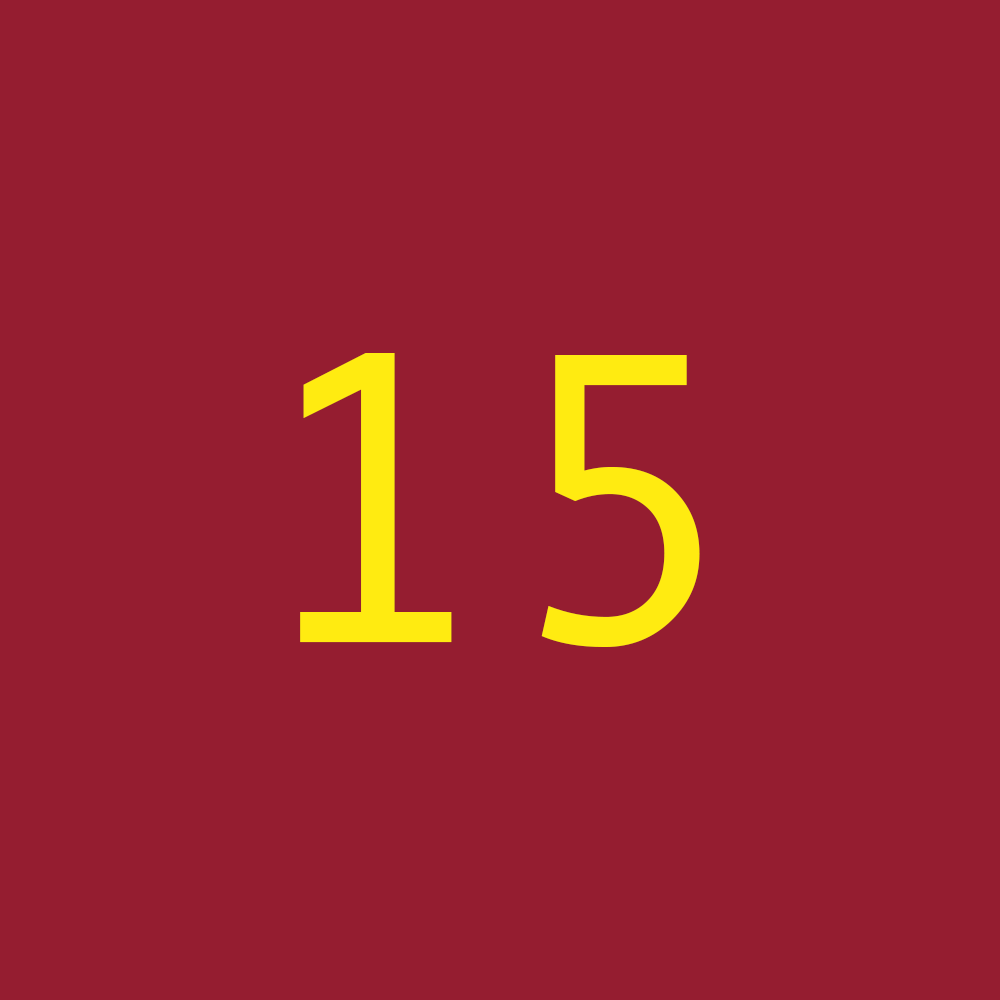
<style>
.page{position:relative;width:1000px;height:1000px;background:#951d30}
.page>*{position:absolute;margin:0}
.t1{font:416.7px "AndaleMono";letter-spacing:0.005em;color:#ffeb11}
</style>
<div class="page">
<p class="t1" style="left:300px;top:353px;width:400px;height:294px">15</p>
</div>
